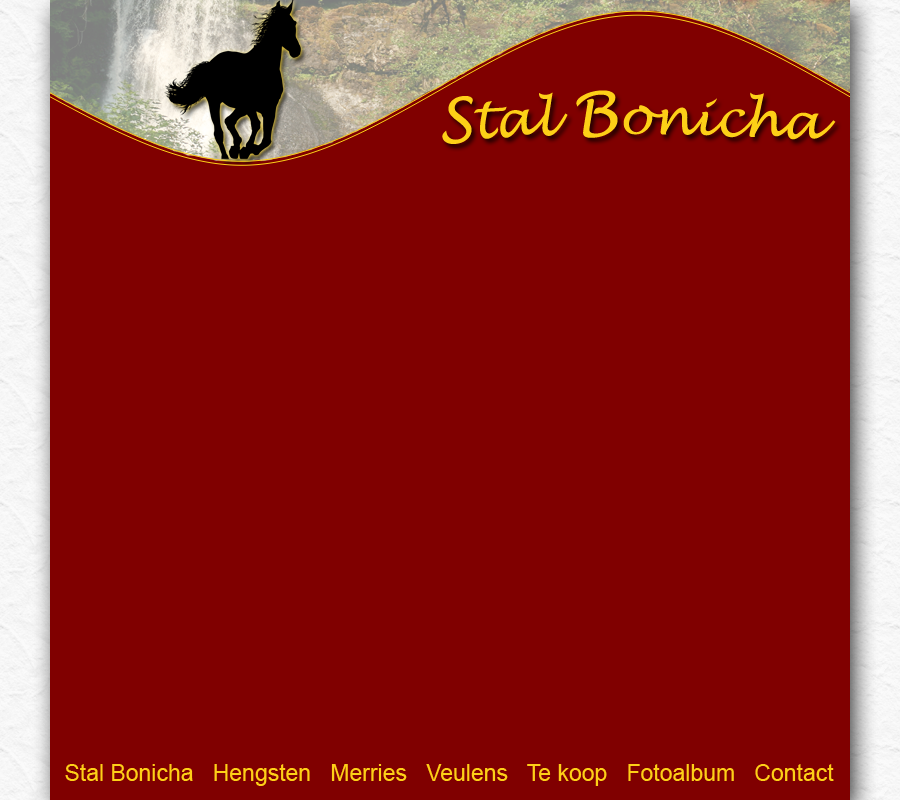
<style>
.page{position:relative;width:900px;height:800px;background:#800000}
.page>*{position:absolute;margin:0}
.t1{font:50px "LucidaHandwriting-Italic";color:#fdd017}
.t2{font:60px "LucidaHandwriting-Italic";color:#fdd017}
.t3{font:23px "ArialMT";color:#fdd017}
</style>
<div class="page">
<p class="t1" style="left:442px;top:90px;width:394px;height:54px"><span class="t2">S</span>tal <span class="t2">B</span>onicha</p>
<p class="t3" style="left:65px;top:764px;width:769px;height:22px">Stal Bonicha   Hengsten   Merries   Veulens   Te koop   Fotoalbum   Contact</p>
</div>
